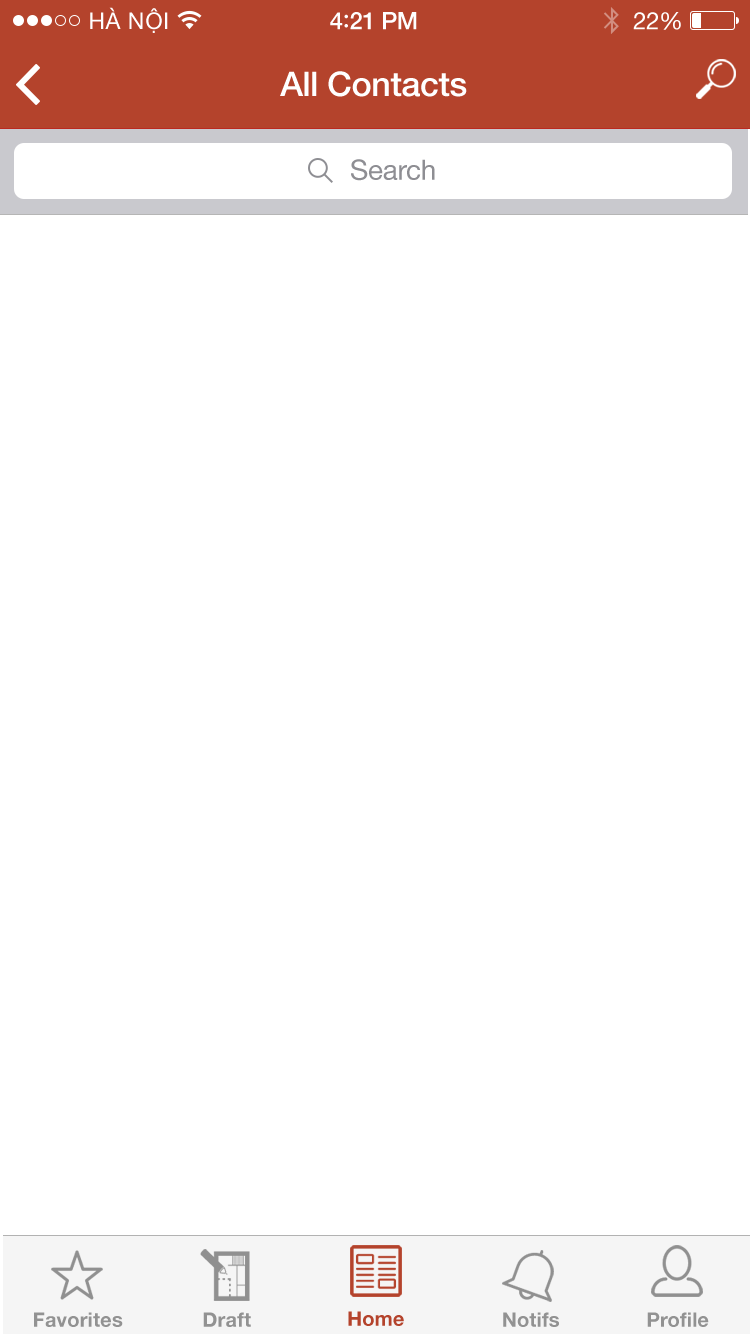
<style>
.page{position:relative;width:750px;height:1334px;background:#ffffff}
.page>*{position:absolute;margin:0}
.t1{font:23px "HelveticaNeue";letter-spacing:0.02em;color:#ffffff}
.t2{font:24px "HelveticaNeue-Medium";letter-spacing:-0.02em;color:#ffffff}
.t3{font:26px "Avenir-Medium";letter-spacing:-0.02em;color:#ffffff}
.t4{font:24px "HelveticaNeue";letter-spacing:-0.02em;color:#ffffff}
.t5{font:34px "HelveticaNeue-Medium";letter-spacing:-0.01em;color:#ffffff}
.t6{font:28px "HelveticaNeue";letter-spacing:-0.01em;color:#8e8e93}
.t7{font:20px "HelveticaNeue-Bold";letter-spacing:0.01em;color:#929292}
.t8{font:20px "HelveticaNeue-Bold";letter-spacing:0.01em;color:#b4432c}
</style>
<div class="page">
<p class="t1" style="left:90px;top:7px;width:78px;height:26px">HÀ NỘI</p>
<p class="t2" style="left:330px;top:12px;width:87px;height:18px">4<span class="t3">:</span>21 PM</p>
<p class="t4" style="left:633px;top:12px;width:48px;height:18px">22%</p>
<p class="t5" style="left:280px;top:71px;width:187px;height:26px">All Contacts</p>
<p class="t6" style="left:351px;top:159px;width:84px;height:22px">Search</p>
<p class="t7" style="left:34px;top:1312px;width:89px;height:15px">Favorites</p>
<p class="t7" style="left:203px;top:1312px;width:48px;height:15px">Draft</p>
<p class="t8" style="left:348px;top:1311px;width:56px;height:15px">Home</p>
<p class="t7" style="left:503px;top:1312px;width:56px;height:15px">Notifs</p>
<p class="t7" style="left:647px;top:1312px;width:62px;height:15px">Profile</p>
</div>
